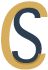
<style>
.page{position:relative;width:48px;height:70px;background:#ffffff}
.page>*{position:absolute;margin:0}
.t1{font:84.9px "Thonburi";color:#d6ad5c;scale:0.94 1}
.t2{font:70.9px "Thonburi";color:#2c3e50;scale:0.81 1}
</style>
<div class="page">
<p class="t1" style="left:1px;top:1px;width:47px;height:69px;rotate:-1deg">C</p>
<p class="t2" style="left:12px;top:7px;width:30px;height:58px;rotate:-1deg">S</p>
</div>
